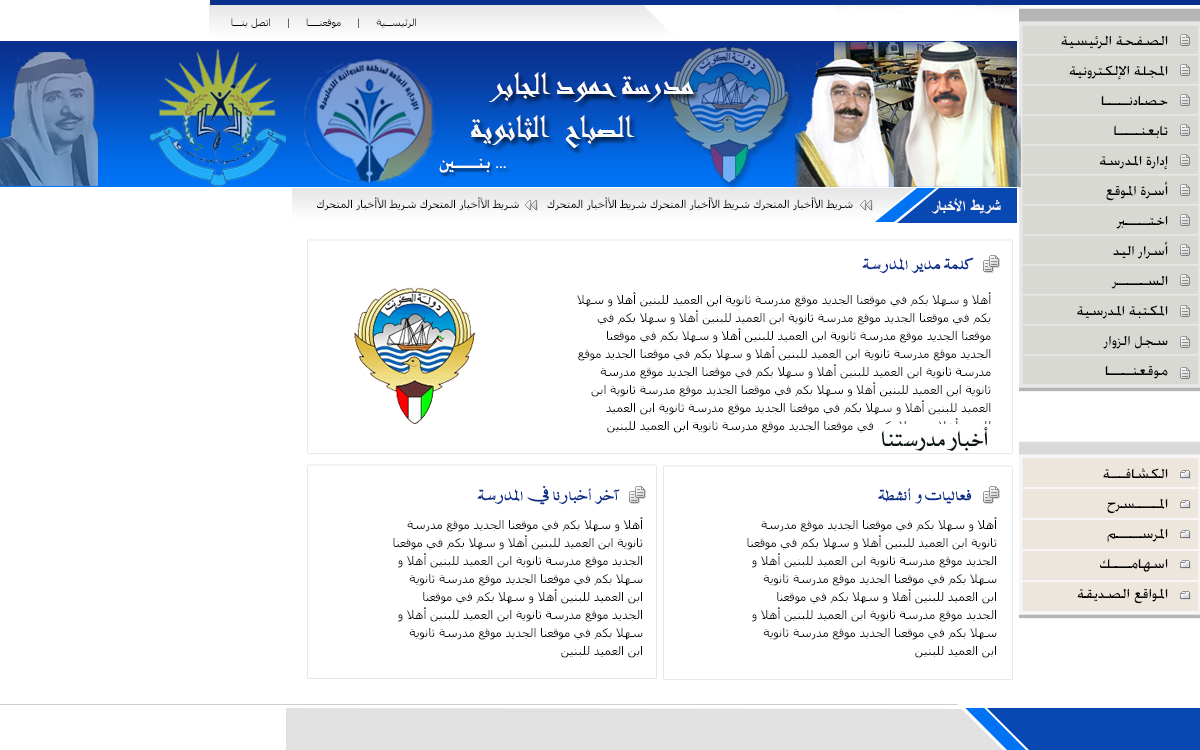
<style>
.page{position:relative;width:1200px;height:750px;background:#ffffff}
.page>*{position:absolute;margin:0}
.t1{font:10px "Tahoma";color:#000000}
.t2{font:16px/30px "AdvertisingMedium";color:#000000}
.t3{font:36px "Andalus";color:#fdfafa}
.t4{font:11px "Tahoma";color:#000000}
.t5{font:16px "ArabicTransparent-Bold";color:#fbf8f8}
.t6{font:16px "MCSNASKOUT";color:#0a308e}
.t7{font:12px/18px "Tahoma";color:#000000}
</style>
<div class="page">
<p class="t1" style="left:231px;top:18px;width:185px;height:10px">الرئيســية     |     موقعنــــا     |     اتصل بنـــا</p>
<p class="t2" style="left:1061px;top:35px;width:107px;height:344px">الصفحة الرئيسية<br>المجلة الإلكترونية<br>حصادنـــــا<br>تابعنـــــا<br>إدارة المدرسة<br>أسرة الموقع<br>اختـــــبر<br>أسرار اليد<br>الســــــر<br>المكتبة المدرسية<br>سجل الزوار<br>موقعنـــــا</p>
<p class="t3" style="left:471px;top:72px;width:223px;height:76px">مدرسة حمود الجابر <br>       الصباح  الثانوية</p>
<p class="t4" style="left:317px;top:197px;width:536px;height:14px">شريط الأأخبار المتحرك شريط الأأخبار المتحرك شريط الأأخبار المتحرك        شريط الأأخبار المتحرك شريط الأأخبار المتحرك</p>
<p class="t5" style="left:931px;top:198px;width:70px;height:16px">شريط الأخبار</p>
<p class="t6" style="left:862px;top:257px;width:112px;height:17px">كلمة مدير المدرسة</p>
<p class="t7" style="left:577px;top:292px;width:414px;height:141px">أهلا و سهلا بكم في موقعنا الجديد موقع مدرسة ثانوية ابن العميد للبنين أهلا و سهلا بكم في موقعنا الجديد موقع مدرسة ثانوية ابن العميد للبنين أهلا و سهلا بكم في موقعنا الجديد موقع مدرسة ثانوية ابن العميد للبنين أهلا و سهلا بكم في موقعنا الجديد موقع مدرسة ثانوية ابن العميد للبنين أهلا و سهلا بكم في موقعنا الجديد موقع مدرسة ثانوية ابن العميد للبنين أهلا و سهلا بكم في موقعنا الجديد موقع مدرسة ثانوية ابن العميد للبنين أهلا و سهلا بكم في موقعنا الجديد موقع مدرسة ثانوية ابن العميد للبنين أهلا و سهلا بكم في موقعنا الجديد موقع مدرسة ثانوية ابن العميد للبنين أهلا و سهلا بكم في موقعنا الجديد موقع مدرسة ثانوية ابن العميد للبنين</p>
<p class="t2" style="left:1077px;top:468px;width:91px;height:136px">الكشافـــة<br>المـــــسرح<br>المرســـــم<br>اسهامــــك<br>المواقع الصديقة</p>
<p class="t6" style="left:477px;top:485px;width:143px;height:20px">آخر أخبارنا في المدرسة</p>
<p class="t6" style="left:878px;top:488px;width:94px;height:16px">فعاليات و أنشطة</p>
<p class="t7" style="left:393px;top:517px;width:250px;height:141px">أهلا و سهلا بكم في موقعنا الجديد موقع مدرسة ثانوية ابن العميد للبنين أهلا و سهلا بكم في موقعنا الجديد موقع مدرسة ثانوية ابن العميد للبنين أهلا و سهلا بكم في موقعنا الجديد موقع مدرسة ثانوية ابن العميد للبنين أهلا و سهلا بكم في موقعنا الجديد موقع مدرسة ثانوية ابن العميد للبنين أهلا و سهلا بكم في موقعنا الجديد موقع مدرسة ثانوية ابن العميد للبنين</p>
<p class="t7" style="left:747px;top:517px;width:250px;height:141px">أهلا و سهلا بكم في موقعنا الجديد موقع مدرسة ثانوية ابن العميد للبنين أهلا و سهلا بكم في موقعنا الجديد موقع مدرسة ثانوية ابن العميد للبنين أهلا و سهلا بكم في موقعنا الجديد موقع مدرسة ثانوية ابن العميد للبنين أهلا و سهلا بكم في موقعنا الجديد موقع مدرسة ثانوية ابن العميد للبنين أهلا و سهلا بكم في موقعنا الجديد موقع مدرسة ثانوية ابن العميد للبنين</p>
</div>
